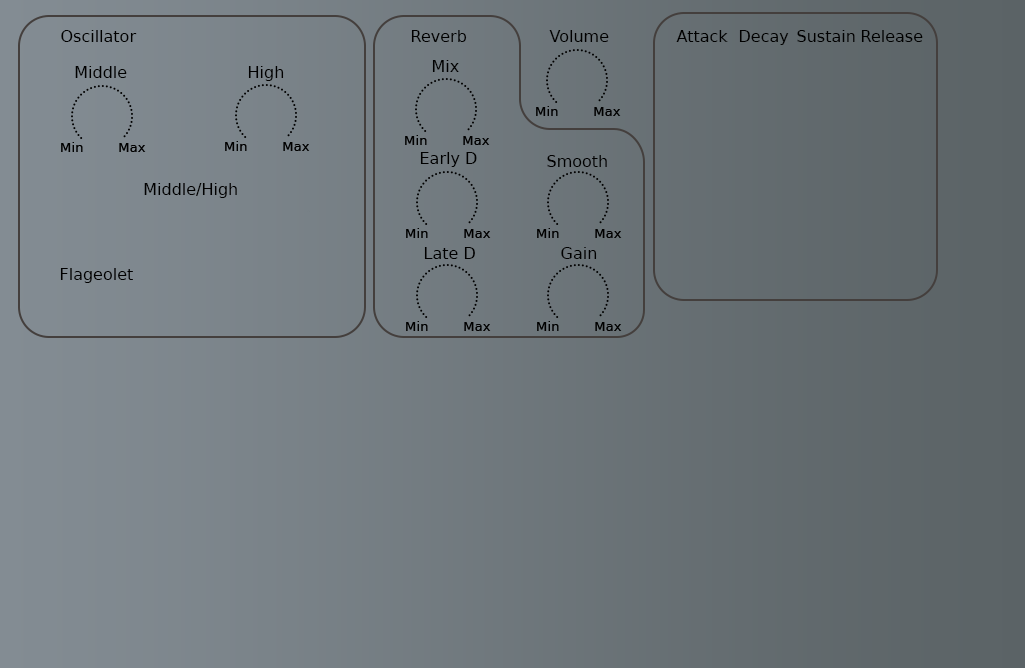
<style>
.page{position:relative;width:1025px;height:668px}
.page>*{position:absolute;margin:0}
.t1{font:16px "SolidWorksGDT";color:#000000}
</style>
<div class="page">
<p class="t1" style="left:61px;top:30px;width:76px;height:12px">Oscillator</p>
<p class="t1" style="left:411px;top:30px;width:56px;height:12px">Reverb</p>
<p class="t1" style="left:549px;top:30px;width:60px;height:12px">Volume</p>
<p class="t1" style="left:676px;top:30px;width:52px;height:12px">Attack</p>
<p class="t1" style="left:739px;top:30px;width:50px;height:15px">Decay</p>
<p class="t1" style="left:797px;top:30px;width:58px;height:12px">Sustain</p>
<p class="t1" style="left:861px;top:30px;width:62px;height:12px">Release</p>
<p class="t1" style="left:432px;top:60px;width:27px;height:12px">Mix</p>
<p class="t1" style="left:75px;top:66px;width:52px;height:12px">Middle</p>
<p class="t1" style="left:248px;top:66px;width:36px;height:15px">High</p>
<p class="t1" style="left:420px;top:152px;width:57px;height:15px">Early D</p>
<p class="t1" style="left:547px;top:155px;width:60px;height:12px">Smooth</p>
<p class="t1" style="left:144px;top:183px;width:93px;height:15px">Middle/High</p>
<p class="t1" style="left:424px;top:247px;width:51px;height:12px">Late D</p>
<p class="t1" style="left:561px;top:247px;width:36px;height:12px">Gain</p>
<p class="t1" style="left:60px;top:268px;width:73px;height:15px">Flageolet</p>
</div>
